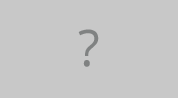
<style>
.page{position:relative;width:178px;height:98px;background:#c8c8c8}
.page>*{position:absolute;margin:0}
.t1{font:50.2px "OpenSans";letter-spacing:0.02em;color:#808282}
</style>
<div class="page">
<p class="t1" style="left:78px;top:29px;width:21px;height:38px">?</p>
</div>
